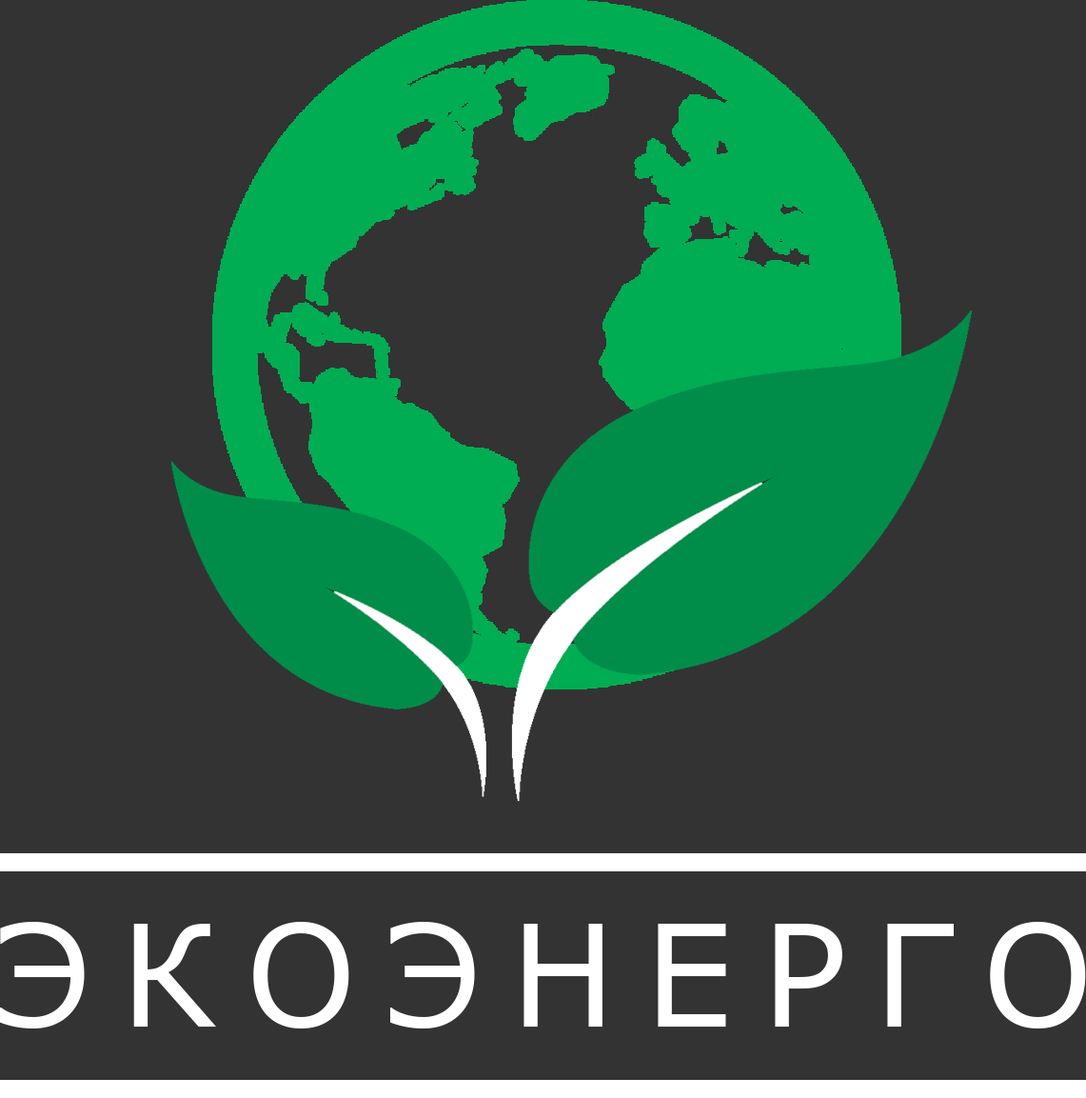
<style>
.page{position:relative;width:1086px;height:1098px;background:#333333}
.page>*{position:absolute;margin:0}
.t1{font:140.6px "Verdana";letter-spacing:0.2em;color:#ffffff}
</style>
<div class="page">
<p class="t1" style="left:0px;top:922px;width:1086px;height:106px">ЭКОЭНЕРГО</p>
</div>
